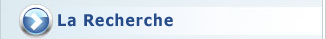
<style>
.page{position:relative;width:326px;height:39px}
.page>*{position:absolute;margin:0}
.t1{font:16.2px "Verdana-Bold";letter-spacing:0.05em;color:#264c8a;scale:0.89 1}
</style>
<div class="page">
<p class="t1" style="left:58px;top:13px;width:115px;height:14px">La Recherche</p>
</div>
